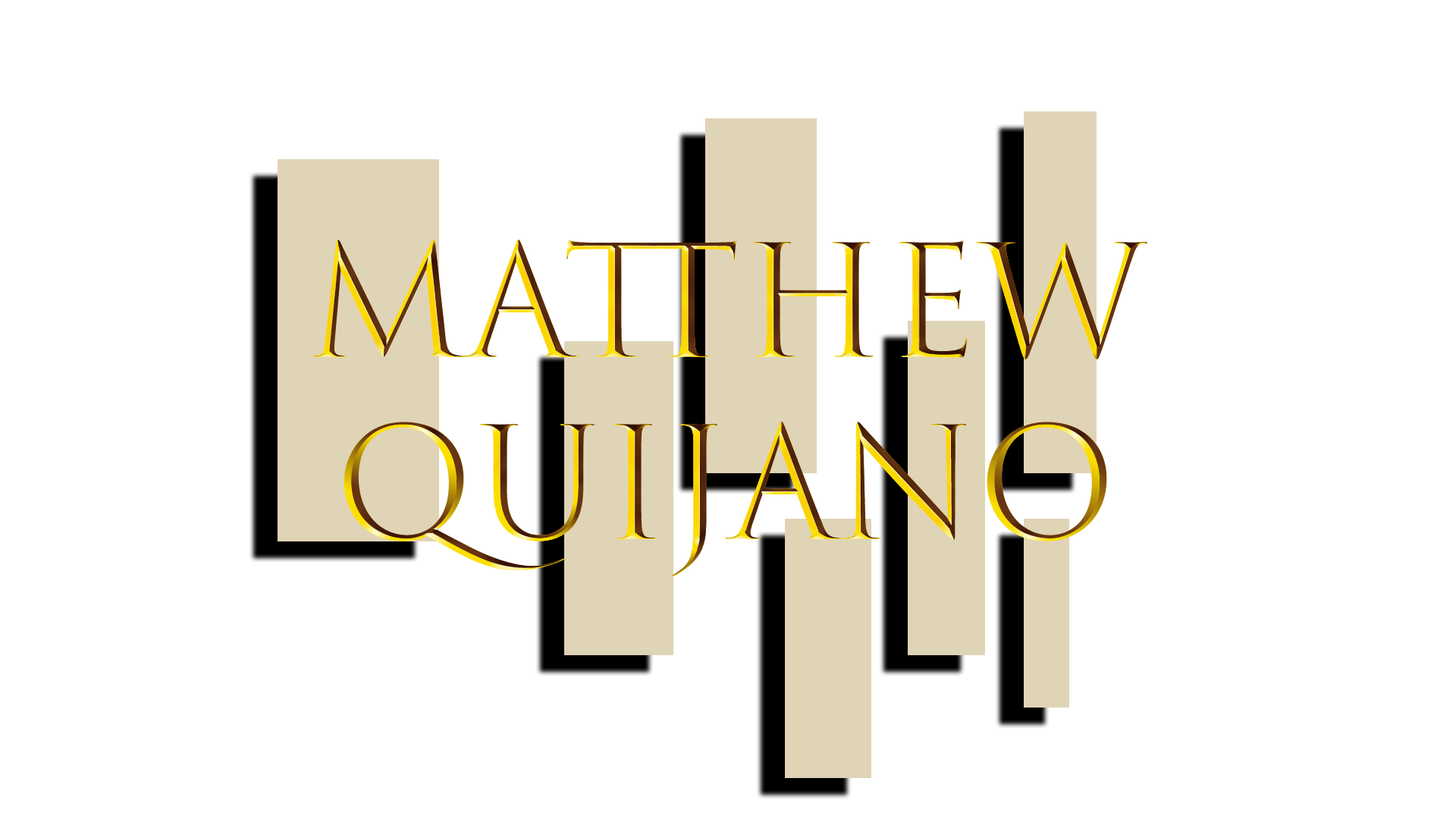
<style>
.page{position:relative;width:1456px;height:819px;background:#ffffff}
.page>*{position:absolute;margin:0}
.t1{font:151.7px "TrajanColor-Concept"}
</style>
<div class="page">
<p class="t1" style="left:313px;top:240px;width:835px;height:336px;text-align:center">Matthew<br>Quijano</p>
</div>
